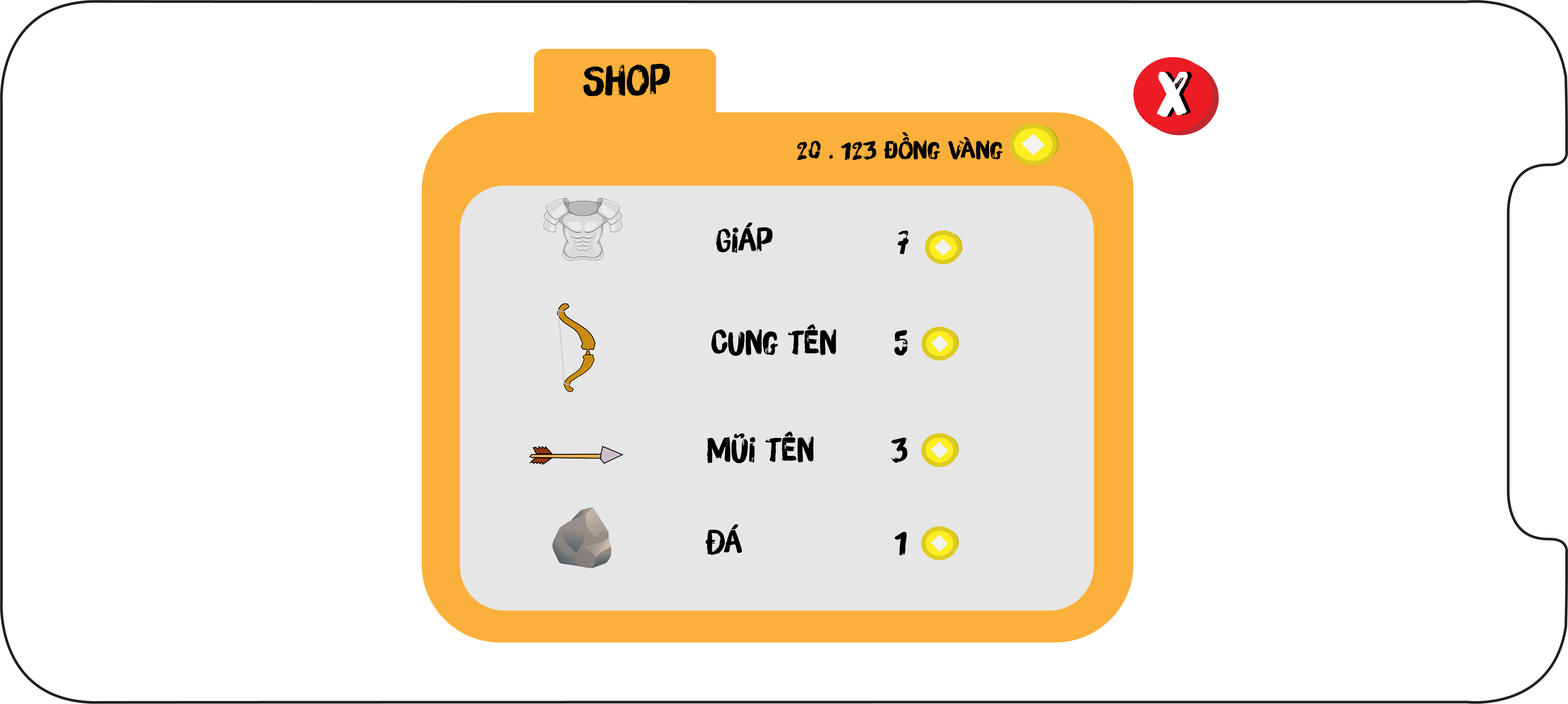
<style>
.page{position:relative;width:1568px;height:704px;background:#ffffff}
.page>*{position:absolute;margin:0}
.t1{font:40.9px "iCielBrushUp";color:#000000;scale:1.06 1}
.t2{font:60.9px "iCielBrushUp";color:#ffffff;scale:1.06 1}
.t3{font:60.9px "iCielBrushUp";scale:1.06 1}
.t4{font:24px "iCielBrushUp";color:#000000;scale:1.17 1}
.t5{font:32.5px "iCielBrushUp";color:#000000;scale:1.06 1}
</style>
<div class="page">
<p class="t1" style="left:583px;top:63px;width:87px;height:33px">Shop</p>
<p class="t2" style="left:1157px;top:71px;width:31px;height:47px">x</p>
<p class="t3" style="left:1161px;top:71px;width:31px;height:47px">x</p>
<p class="t4" style="left:797px;top:132px;width:206px;height:28px">20 . 123 đồng vàng</p>
<p class="t5" style="left:716px;top:222px;width:193px;height:32px">Giáp             7</p>
<p class="t5" style="left:711px;top:324px;width:197px;height:32px">Cung tên      5</p>
<p class="t5" style="left:707px;top:431px;width:201px;height:32px">Mũi tên        3</p>
<p class="t5" style="left:706px;top:524px;width:201px;height:32px">Đá                1</p>
</div>
